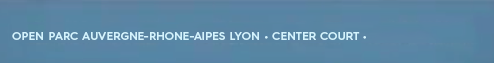
<style>
.page{position:relative;width:494px;height:63px}
.page>*{position:absolute;margin:0}
.t1{font:11.5px "HurmeGeometricSans4-SemiBold";color:#d3f3fd}
</style>
<div class="page">
<p class="t1" style="left:12px;top:32px;width:247px;height:8px">OPEN PARC AUVERGNE-RHONE-AIPES LYON</p>
<p class="t1" style="left:265px;top:32px;width:101px;height:8px">• CENTER COURT •</p>
</div>
